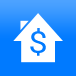
<style>
.page{position:relative;width:76px;height:76px;background:#007aff}
.page>*{position:absolute;margin:0}
.t1{font:29.7px "Roboto-Regular";color:#007aff;scale:1.15 1}
</style>
<div class="page">
<p class="t1" style="left:30px;top:28px;width:16px;height:28px">$</p>
</div>
